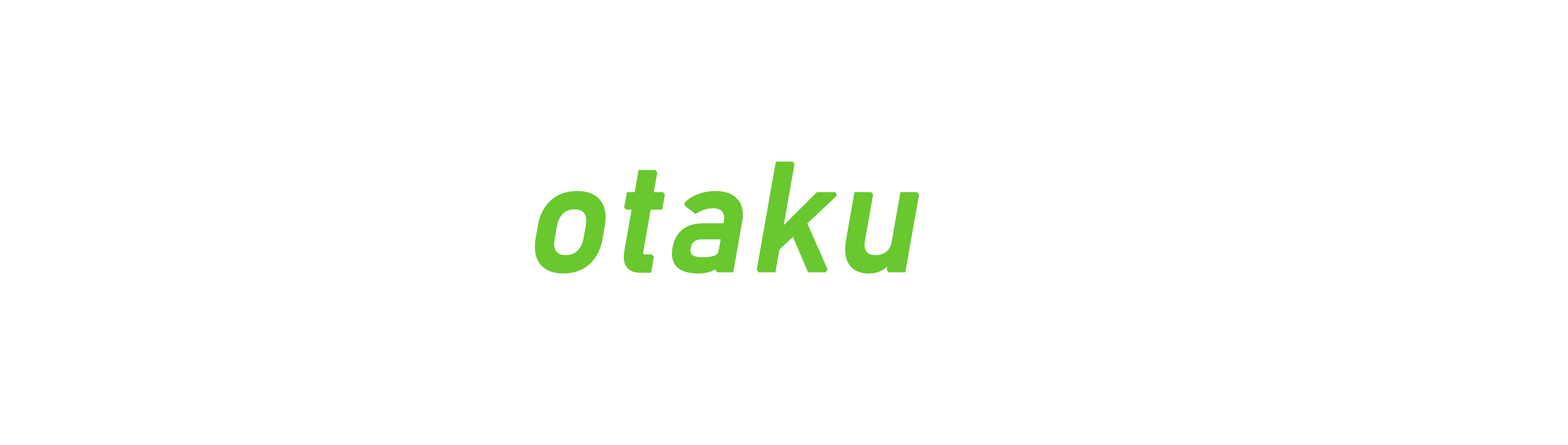
<style>
.page{position:relative;width:1568px;height:445px;background:#ffffff}
.page>*{position:absolute;margin:0}
.t1{font:150.5px "Bahnschrift";color:#68c82d;font-weight:bold;font-style:italic}
</style>
<div class="page">
<p class="t1" style="left:535px;top:162px;width:384px;height:112px">otaku</p>
</div>
